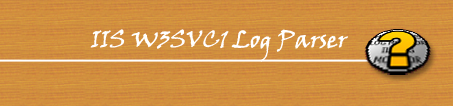
<style>
.page{position:relative;width:453px;height:106px}
.page>*{position:absolute;margin:0}
.t1{font:24px "VinerHandITC";color:#ffffff}
</style>
<div class="page">
<p class="t1" style="left:90px;top:29px;width:258px;height:33px">IIS W3SVC1 Log Parser</p>
</div>
